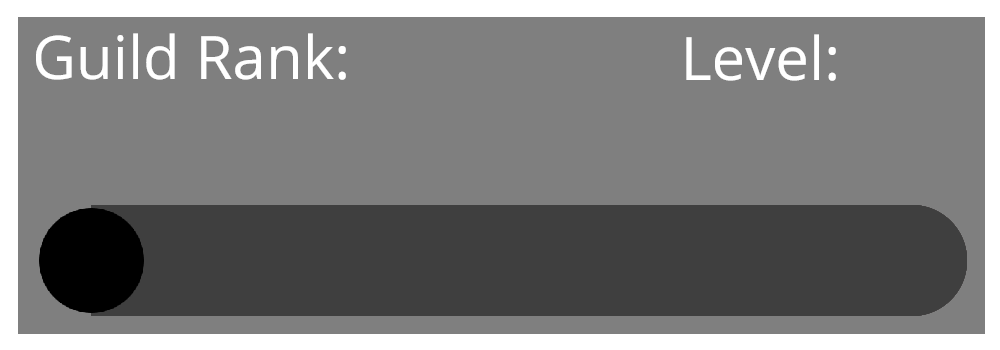
<style>
.page{position:relative;width:1000px;height:350px;background:#7f7f7f}
.page>*{position:absolute;margin:0}
.t1{font:60px "OpenSans-Regular";color:#ffffff}
</style>
<div class="page">
<p class="t1" style="left:36px;top:33px;width:310px;height:47px">Guild Rank:</p>
<p class="t1" style="left:686px;top:34px;width:150px;height:47px">Level:</p>
</div>
